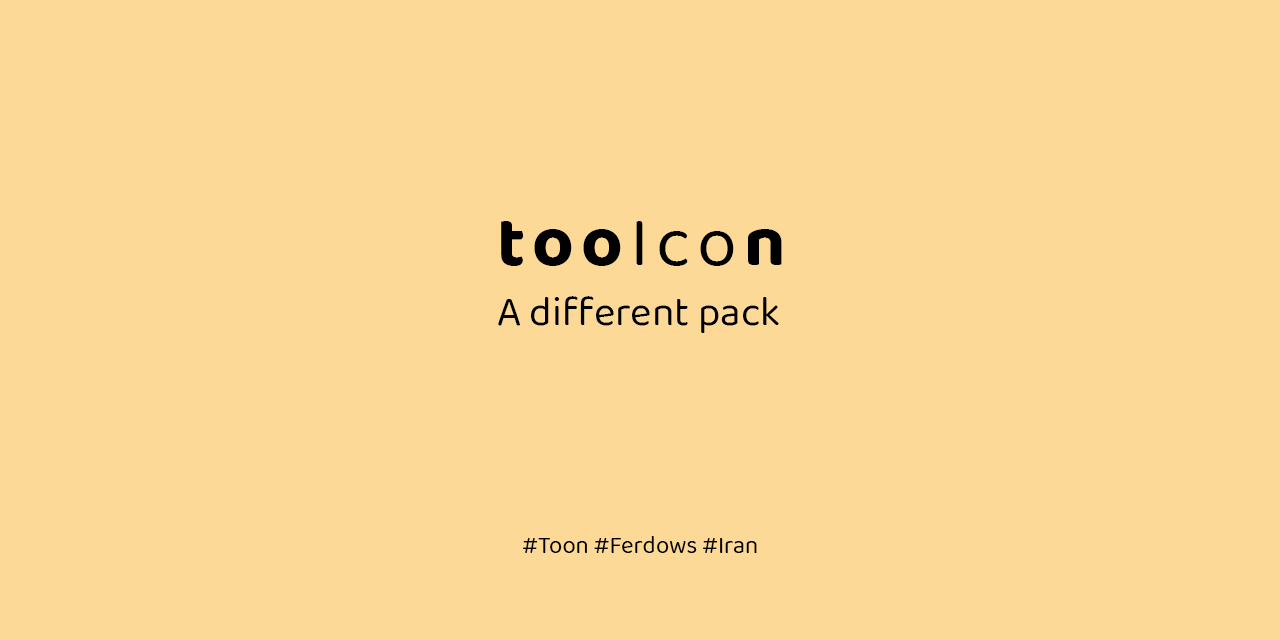
<style>
.page{position:relative;width:1280px;height:640px;background:#fdd998}
.page>*{position:absolute;margin:0}
.t1{font:41px/60px "BalooBhai2-Regular";color:#000000}
.t2{font:72px/60px "BalooBhai2-Bold";letter-spacing:0.1em;color:#000000}
.t3{font:72px/60px "BalooBhai2-Regular";letter-spacing:0.1em;color:#000000}
.t4{font:24px "BalooBhai2-Regular";color:#000000}
</style>
<div class="page">
<p class="t1" style="left:498px;top:221px;width:284px;height:112px"><span class="t2">too</span><span class="t3">Ico</span><span class="t2">n<br></span>A different pack</p>
<p class="t4" style="left:523px;top:536px;width:234px;height:17px">#Toon #Ferdows #Iran</p>
</div>
